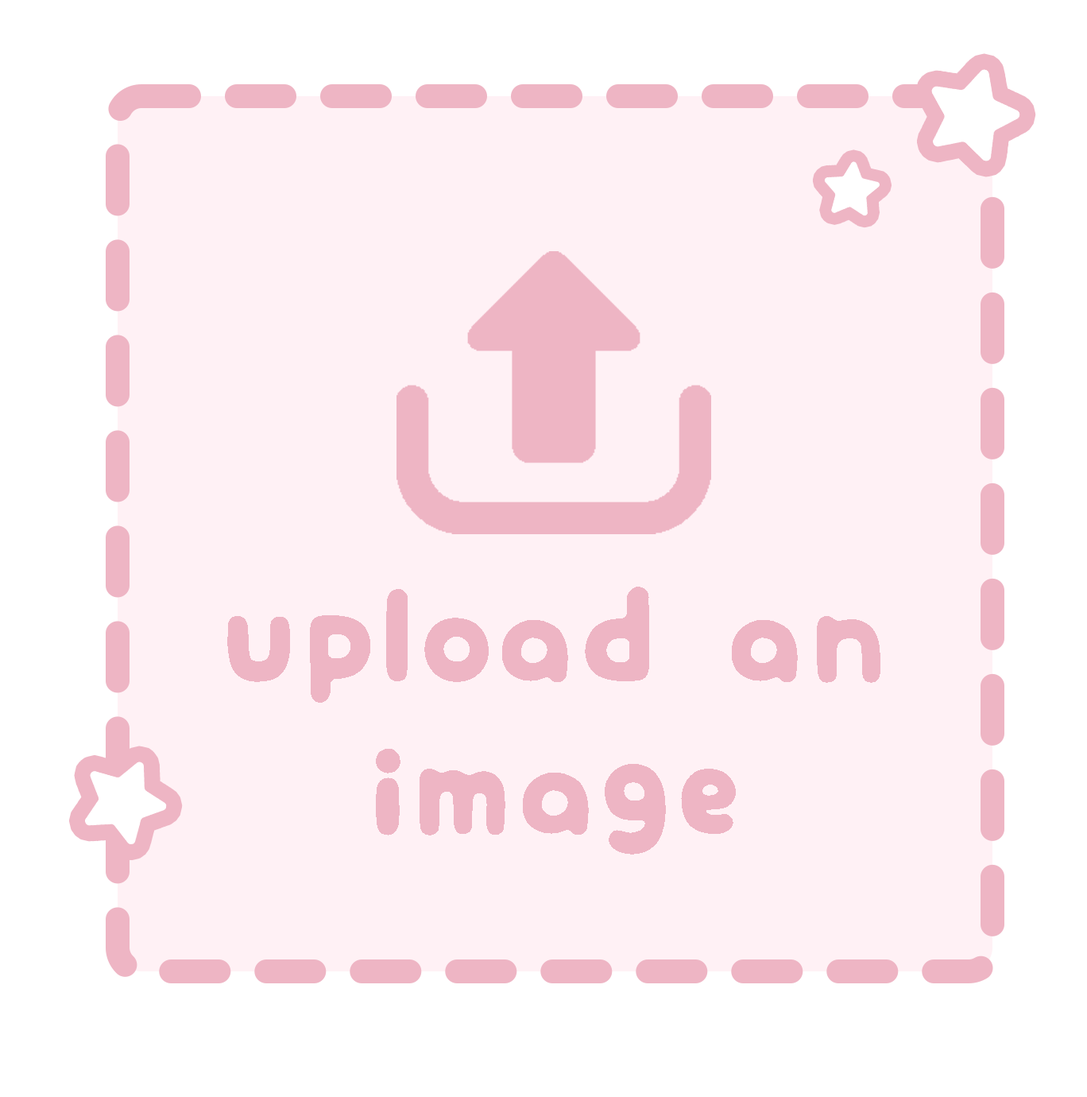
<style>
.page{position:relative;width:1087px;height:1097px;background:#fff1f5}
.page>*{position:absolute;margin:0}
.t1{font:127.4px "mini-wakuwaku-maru";letter-spacing:0.01em;color:#eeb5c4}
</style>
<div class="page">
<p class="t1" style="left:227px;top:587px;width:654px;height:267px;text-align:center">upload an<br>image</p>
</div>
